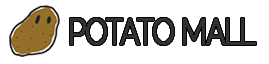
<style>
.page{position:relative;width:269px;height:64px;background:#ffffff}
.page>*{position:absolute;margin:0}
.t1{font:34.4px "NEXONLv1GothicRegular";letter-spacing:-0.05em;color:#323232;font-weight:bold;scale:0.78 1}
</style>
<div class="page">
<p class="t1" style="left:70px;top:18px;width:186px;height:27px">POTATO MALL</p>
</div>
